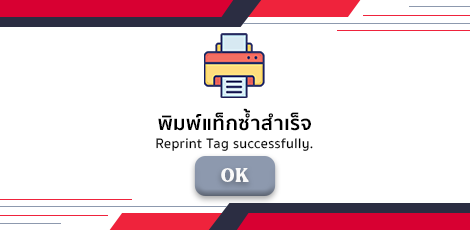
<style>
.page{position:relative;width:470px;height:230px;background:#ffffff}
.page>*{position:absolute;margin:0}
.t1{font:20px "SukhumvitSet-Bold";letter-spacing:0.025em;color:#000000}
.t2{font:14px "SukhumvitSet-Medium";letter-spacing:0.025em;color:#000000}
.t3{font:18px "MADEDillan";letter-spacing:0.025em;color:#f9f9f9}
</style>
<div class="page">
<p class="t1" style="left:158px;top:108px;width:153px;height:23px">พิมพ์แท็กซ้ำสำเร็จ</p>
<p class="t2" style="left:156px;top:138px;width:157px;height:13px">Reprint Tag successfully.</p>
<p class="t3" style="left:221px;top:168px;width:28px;height:14px">OK</p>
</div>
